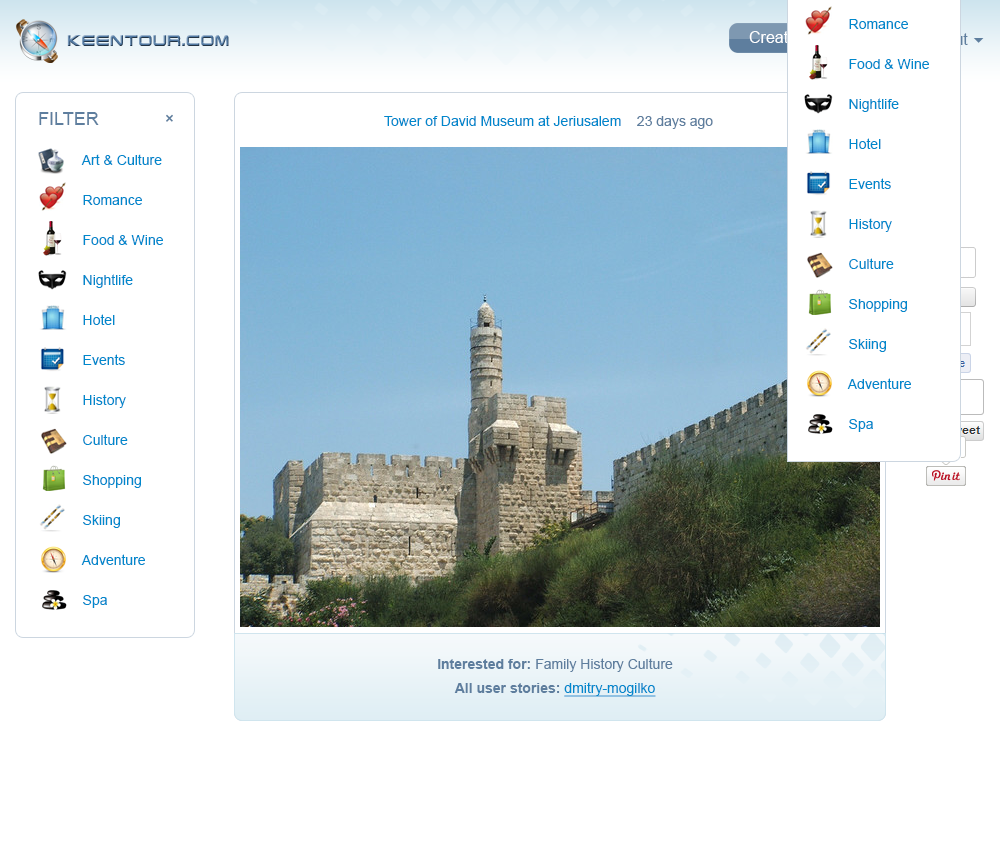
<style>
.page{position:relative;width:1000px;height:848px;background:#ffffff}
.page>*{position:absolute;margin:0}
.t1{font:15px "TerminatorCyr4-Semi-expandedBold";letter-spacing:0.05em;scale:0.8 1}
.t2{font:16px "ArialMT";color:#ffffff}
.t3{font:18px "ArialMT";color:#5e7e9e;text-transform:uppercase}
.t4{font:14px "ArialMT";color:#0088cc}
.t5{font:14px "ArialMT";color:#5e7e9e}
.t6{font:14px/40px "ArialMT";color:#0088cc}
.t7{font:14px/24px "ArialMT";color:#5e7e9e}
.t8{font:14px/24px "Arial-BoldMT";color:#5e7e9e}
.t9{font:14px/24px "ArialMT";color:#0088cc;text-decoration:underline}
</style>
<div class="page">
<p class="t1" style="left:67px;top:35px;width:162px;height:11px">keentour.com</p>
<p class="t2" style="left:749px;top:31px;width:48px;height:12px">Create</p>
<p class="t3" style="left:39px;top:112px;width:60px;height:13px">Filter</p>
<p class="t3" style="left:166px;top:114px;width:7px;height:8px;rotate:45deg">+</p>
<p class="t4" style="left:384px;top:115px;width:329px;height:14px">Tower of David Museum at Jeriusalem    <span class="t5">23 days ago</span></p>
<p class="t6" style="left:81px;top:154px;width:82px;height:454px;text-align:justify">Art &amp; Culture<br>    Romance<br>    Food &amp; Wine<br>    Nightlife<br>    Hotel<br>    Events<br>    History<br>    Culture<br>    Shopping<br>    Skiing<br>    Adventure<br>    Spa</p>
<p class="t7" style="left:438px;top:658px;width:235px;height:39px;text-align:center"><span class="t8">Interested for: </span>Family History Culture<br><span class="t8">All user stories: </span><span class="t9">dmitry-mogilko</span></p>
</div>
